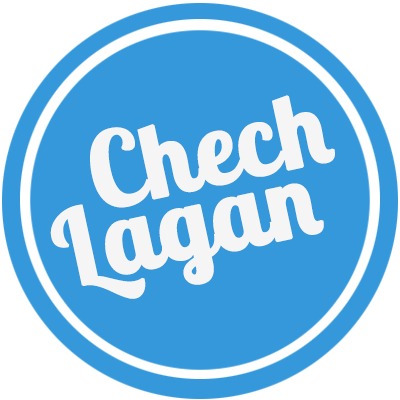
<style>
.page{position:relative;width:400px;height:400px;background:#3498db}
.page>*{position:absolute;margin:0}
.t1{font:101.5px/67.5px "LobsterTwo-Bold";color:#f5f5f5;font-weight:bold}
</style>
<div class="page">
<p class="t1" style="left:50px;top:95px;width:285px;height:204px;text-align:center;rotate:-12deg">Chech<br> Lagan</p>
</div>
